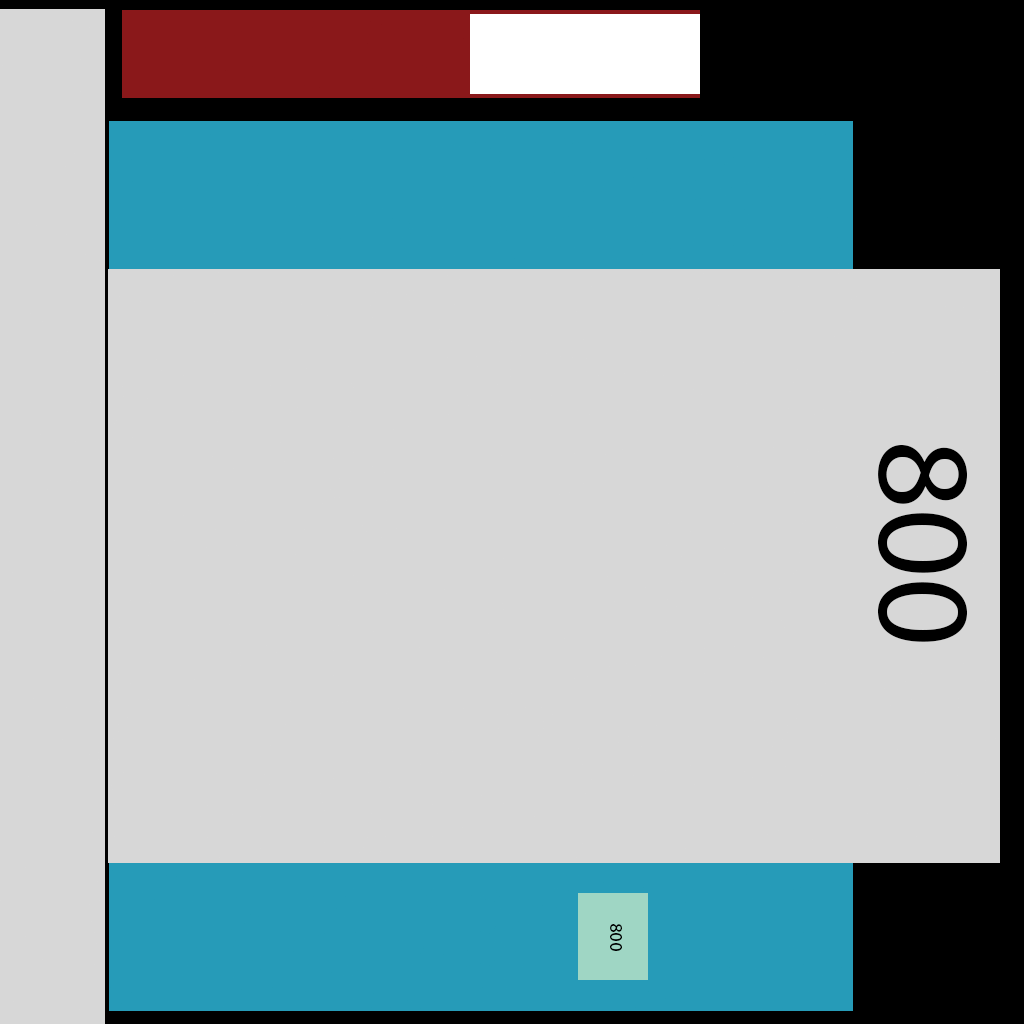
<style>
.page{position:relative;width:1024px;height:1024px;background:#d7d7d7}
.page>*{position:absolute;margin:0}
.t1{font:134.4px "MyriadPro-Regular";color:#000000}
.t2{font:18px "MyriadPro-Regular";color:#000000}
</style>
<div class="page">
<p class="t1" style="left:878px;top:445px;width:90px;height:197px;rotate:90deg">800</p>
<p class="t2" style="left:610px;top:924px;width:12px;height:27px;rotate:90deg">800</p>
</div>
